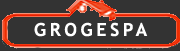
<style>
.page{position:relative;width:180px;height:51px;background:#333333}
.page>*{position:absolute;margin:0}
.t1{font:18px "TrebuchetMS-Bold";letter-spacing:0.2em;color:#ffffff}
</style>
<div class="page">
<p class="t1" style="left:34px;top:22px;width:114px;height:15px">GROGESPA</p>
</div>
